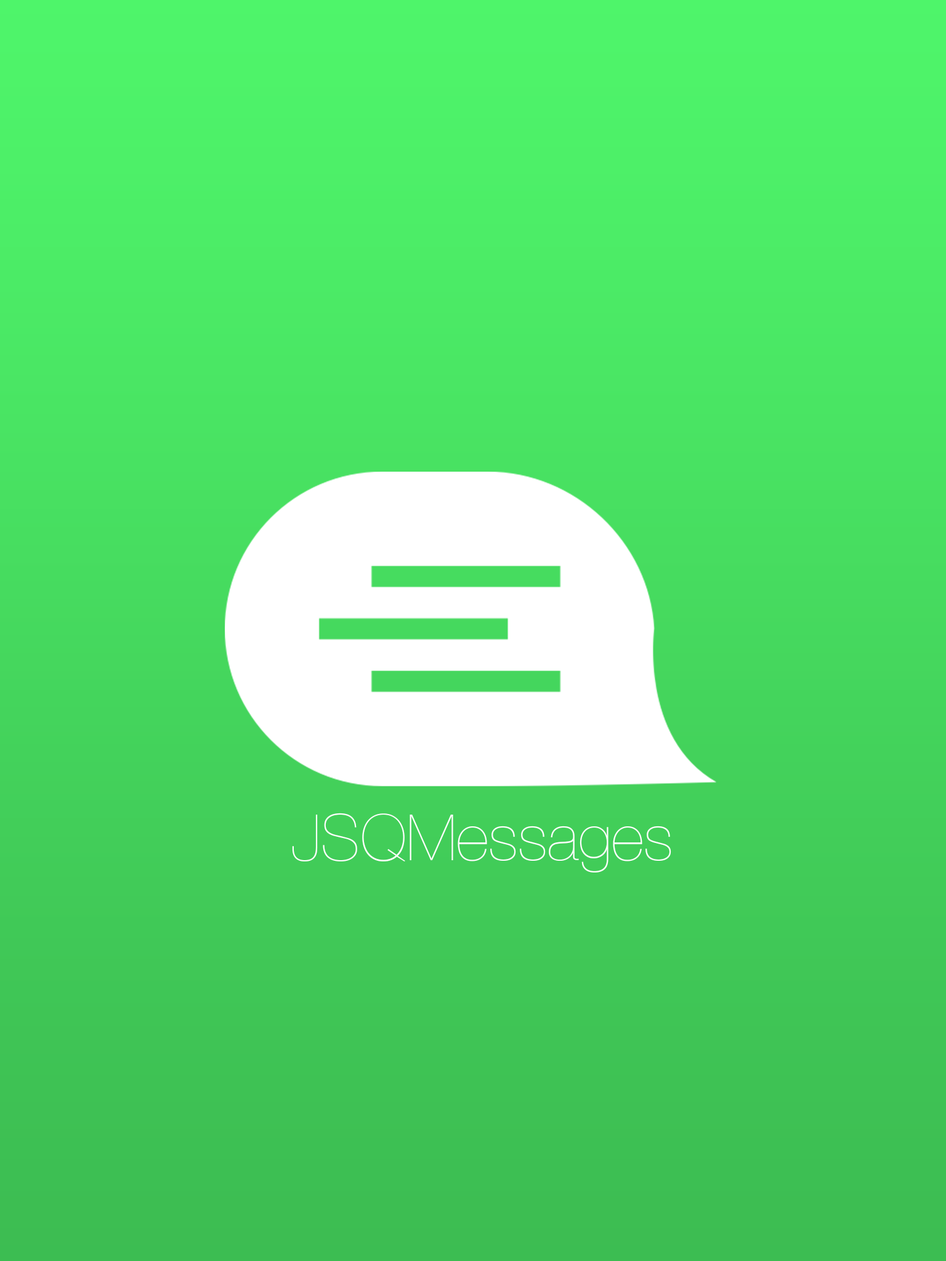
<style>
.page{position:relative;width:946px;height:1261px}
.page>*{position:absolute;margin:0}
.t1{font:64px "HelveticaNeue-UltraLight";color:#ffffff}
</style>
<div class="page">
<p class="t1" style="left:292px;top:813px;width:379px;height:59px">JSQMessages</p>
</div>
